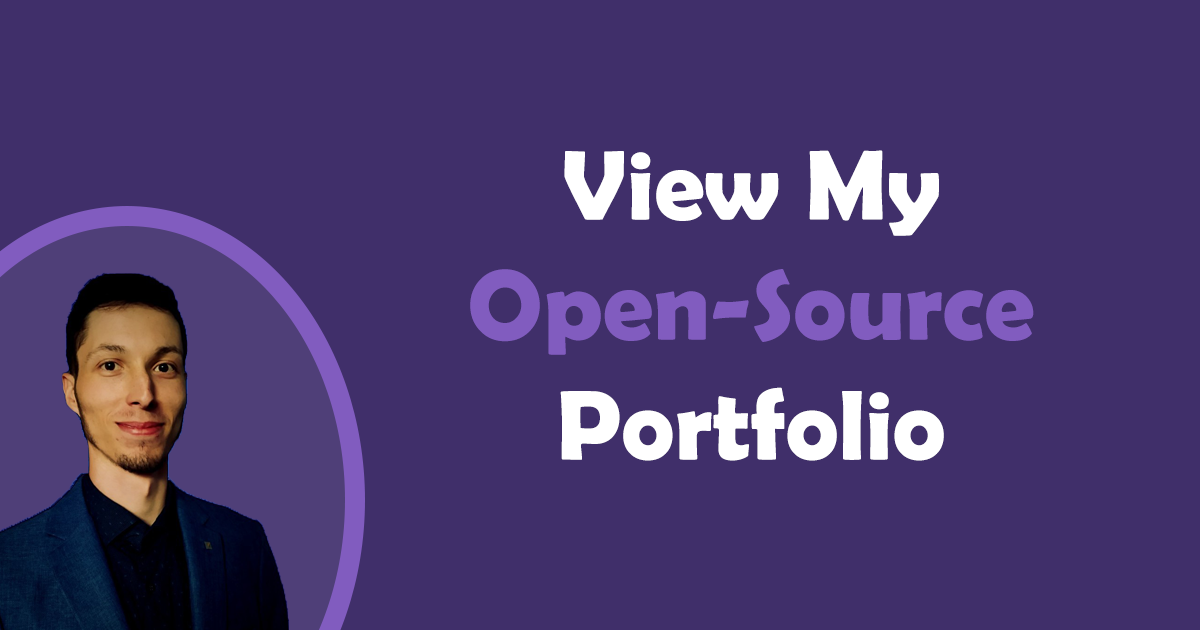
<style>
.page{position:relative;width:1200px;height:630px;background:#402f6a}
.page>*{position:absolute;margin:0}
.t1{font:100px "BerlinSansFBDemi-Bold";color:#815cbf}
.t2{font:100px "BerlinSansFBDemi-Bold";color:#ffffff}
</style>
<div class="page">
<p class="t1" style="left:470px;top:150px;width:564px;height:311px;text-align:center"><span class="t2">View My<br></span>Open-Source<br><span class="t2">Portfolio</span></p>
</div>
